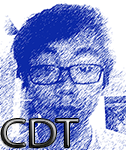
<style>
.page{position:relative;width:126px;height:150px}
.page>*{position:absolute;margin:0}
.t1{font:41.5px "MyriadPro-Regular";scale:1.1 1}
</style>
<div class="page">
<p class="t1" style="left:1px;top:119px;width:78px;height:28px">CDT</p>
</div>
